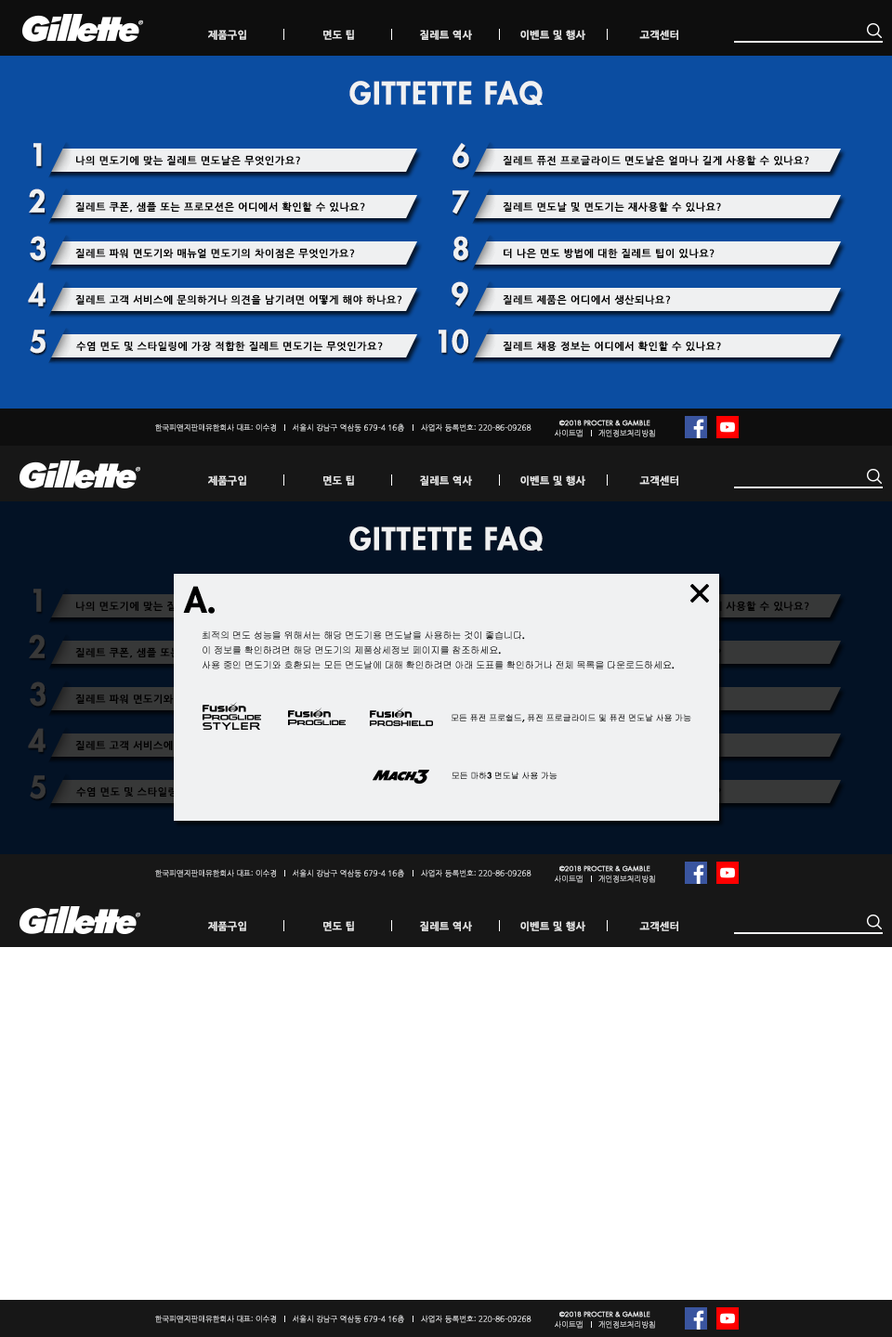
<style>
.page{position:relative;width:892px;height:1337px;background:#ffffff}
.page>*{position:absolute;margin:0}
.t1{font:10.1px "NanumGothicBold";color:#e6e6e6;font-weight:bold}
.t2{font:10.2px "NanumGothicBold";color:#e6e6e6;font-weight:bold}
.t3{font:29.7px "Futura-Heavy";letter-spacing:0.025em;color:#f0f1f2;font-weight:bold}
.t4{font:10.2px "NanumGothicBold";letter-spacing:0.025em;color:#000000;font-weight:bold}
.t5{font:29.7px "Futura-Heavy";letter-spacing:-0.03em;color:#f0f1f2;font-weight:bold}
.t6{font:7.4px "NanumGothicLight";font-weight:bold}
.t7{font:7.4px "NanumGothicLight";color:#f0f1f2;font-weight:bold}
.t8{font:7.4px "FuturaTEE-Book";color:#f0f1f2;font-weight:bold}
.t9{font:29.7px "Futura-Heavy";letter-spacing:0.025em;color:#383838;font-weight:bold}
.t10{font:33.4px "Futura-Heavy";letter-spacing:-0.03em;color:#000000;font-weight:bold}
.t11{font:9.3px/14.9px "Gulim";letter-spacing:-0.03em;color:#000000;font-weight:bold}
.t12{font:9.3px/14.9px "Futura-Heavy";letter-spacing:-0.03em;color:#000000;font-weight:bold}
.t13{font:8.4px "Gulim";letter-spacing:-0.03em;color:#000000;font-weight:bold}
.t14{font:8.4px "Futura-Heavy";letter-spacing:-0.03em;color:#000000;font-weight:bold}
</style>
<div class="page">
<p class="t1" style="left:208px;top:30px;width:38px;height:10px">제품구입</p>
<p class="t2" style="left:323px;top:30px;width:31px;height:10px">면도 팁</p>
<p class="t1" style="left:420px;top:30px;width:52px;height:10px">질레트 역사</p>
<p class="t1" style="left:520px;top:30px;width:65px;height:10px">이벤트 및 행사</p>
<p class="t1" style="left:639px;top:30px;width:39px;height:10px">고객센터</p>
<p class="t3" style="left:349px;top:81px;width:193px;height:25px">GITTETTE FAQ</p>
<p class="t3" style="left:33px;top:143px;width:9px;height:23px">1</p>
<p class="t3" style="left:452px;top:143px;width:17px;height:25px">6</p>
<p class="t4" style="left:76px;top:155px;width:224px;height:10px">나의 면도기에 맞는 질레트 면도날은 무엇인가요?</p>
<p class="t4" style="left:502px;top:155px;width:307px;height:10px">질레트 퓨전 프로글라이드 면도날은 얼마나 길게 사용할 수 있나요?</p>
<p class="t3" style="left:29px;top:189px;width:16px;height:24px">2</p>
<p class="t3" style="left:452px;top:190px;width:17px;height:25px">7</p>
<p class="t4" style="left:75px;top:202px;width:290px;height:11px">질레트 쿠폰, 샘플 또는 프로모션은 어디에서 확인할 수 있나요?</p>
<p class="t4" style="left:502px;top:202px;width:219px;height:10px">질레트 면도날 및 면도기는 재사용할 수 있나요?</p>
<p class="t3" style="left:30px;top:236px;width:16px;height:25px">3</p>
<p class="t3" style="left:453px;top:236px;width:15px;height:25px">8</p>
<p class="t4" style="left:75px;top:248px;width:280px;height:10px">질레트 파워 면도기와 매뉴얼 면도기의 차이점은 무엇인가요?</p>
<p class="t4" style="left:503px;top:248px;width:211px;height:10px">더 나은 면도 방법에 대한 질레트 팁이 있나요?</p>
<p class="t3" style="left:451px;top:281px;width:17px;height:25px">9</p>
<p class="t3" style="left:28px;top:282px;width:18px;height:24px">4</p>
<p class="t4" style="left:75px;top:294px;width:327px;height:11px">질레트 고객 서비스에 문의하거나 의견을 남기려면 어떻게 해야 하나요?</p>
<p class="t4" style="left:502px;top:294px;width:169px;height:11px">질레트 제품은 어디에서 생산되나요?</p>
<p class="t3" style="left:30px;top:330px;width:16px;height:24px">5</p>
<p class="t5" style="left:438px;top:329px;width:30px;height:25px">10</p>
<p class="t4" style="left:76px;top:341px;width:307px;height:10px">수염 면도 및 스타일링에 가장 적합한 질레트 면도기는 무엇인가요?</p>
<p class="t4" style="left:502px;top:341px;width:219px;height:10px">질레트 채용 정보는 어디에서 확인할 수 있나요?</p>
<p class="t6" style="left:155px;top:424px;width:121px;height:8px">한국피앤지판매유한회사 대표: 이수경</p>
<p class="t7" style="left:293px;top:424px;width:111px;height:8px">서울시 강남구 역삼동 679-4 16층</p>
<p class="t7" style="left:421px;top:424px;width:110px;height:8px">사업자 등록번호: 220-86-09268</p>
<p class="t8" style="left:559px;top:420px;width:91px;height:6px">©2018 PROCTER &amp; GAMBLE</p>
<p class="t6" style="left:554px;top:429px;width:28px;height:8px">사이트맵</p>
<p class="t7" style="left:598px;top:429px;width:57px;height:8px">개인정보처리방침</p>
<p class="t1" style="left:208px;top:476px;width:38px;height:10px">제품구입</p>
<p class="t2" style="left:323px;top:476px;width:31px;height:10px">면도 팁</p>
<p class="t1" style="left:420px;top:476px;width:52px;height:10px">질레트 역사</p>
<p class="t1" style="left:520px;top:476px;width:65px;height:10px">이벤트 및 행사</p>
<p class="t1" style="left:639px;top:476px;width:39px;height:10px">고객센터</p>
<p class="t3" style="left:349px;top:527px;width:193px;height:25px">GITTETTE FAQ</p>
<p class="t9" style="left:33px;top:589px;width:9px;height:23px">1</p>
<p class="t10" style="left:183px;top:586px;width:32px;height:28px">A.</p>
<p class="t9" style="left:29px;top:634px;width:16px;height:24px">2</p>
<p class="t11" style="left:202px;top:632px;width:472px;height:38px">최적의 면도 성능을 위해서는 해당 면도기용 면도날을 사용하는 것이 좋습니다<span class="t12">. <br></span>이 정보를 확인하려면 해당 면도기의 제품상세정보 페이지를 참조하세요<span class="t12">. <br></span>사용 중인 면도기와 호환되는 모든 면도날에 대해 확인하려면 아래 도표를 확인하거나 전체 목록을 다운로드하세요<span class="t12">.</span></p>
<p class="t9" style="left:30px;top:682px;width:16px;height:25px">3</p>
<p class="t13" style="left:450px;top:714px;width:241px;height:9px">모든 퓨전 프로쉴드<span class="t14">, </span>퓨전 프로글라이드 및 퓨전 면도날 사용 가능</p>
<p class="t9" style="left:28px;top:728px;width:18px;height:24px">4</p>
<p class="t13" style="left:451px;top:772px;width:106px;height:8px">모든 마하<span class="t14">3 </span>면도날 사용 가능</p>
<p class="t9" style="left:30px;top:776px;width:16px;height:24px">5</p>
<p class="t6" style="left:155px;top:869px;width:121px;height:9px">한국피앤지판매유한회사 대표: 이수경</p>
<p class="t7" style="left:293px;top:869px;width:111px;height:9px">서울시 강남구 역삼동 679-4 16층</p>
<p class="t7" style="left:421px;top:869px;width:110px;height:9px">사업자 등록번호: 220-86-09268</p>
<p class="t8" style="left:559px;top:866px;width:91px;height:6px">©2018 PROCTER &amp; GAMBLE</p>
<p class="t6" style="left:554px;top:875px;width:28px;height:8px">사이트맵</p>
<p class="t7" style="left:598px;top:875px;width:57px;height:8px">개인정보처리방침</p>
<p class="t1" style="left:208px;top:921px;width:38px;height:11px">제품구입</p>
<p class="t2" style="left:323px;top:921px;width:31px;height:11px">면도 팁</p>
<p class="t1" style="left:420px;top:921px;width:52px;height:11px">질레트 역사</p>
<p class="t1" style="left:520px;top:921px;width:65px;height:11px">이벤트 및 행사</p>
<p class="t1" style="left:639px;top:921px;width:39px;height:11px">고객센터</p>
<p class="t8" style="left:559px;top:1311px;width:91px;height:7px">©2018 PROCTER &amp; GAMBLE</p>
<p class="t6" style="left:155px;top:1315px;width:121px;height:8px">한국피앤지판매유한회사 대표: 이수경</p>
<p class="t7" style="left:293px;top:1315px;width:111px;height:8px">서울시 강남구 역삼동 679-4 16층</p>
<p class="t7" style="left:421px;top:1315px;width:110px;height:8px">사업자 등록번호: 220-86-09268</p>
<p class="t6" style="left:554px;top:1321px;width:28px;height:8px">사이트맵</p>
<p class="t7" style="left:598px;top:1321px;width:57px;height:8px">개인정보처리방침</p>
</div>
